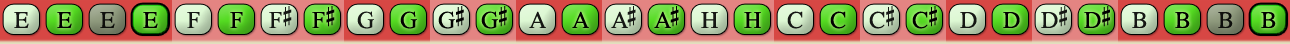
<style>
.page{position:relative;width:1290px;height:44px}
.page>*{position:absolute;margin:0}
.t1{font:24px "OpusChords";color:#000000}
.t2{font:24px "OpusChords";letter-spacing:-0.025em;color:#000000}
.t3{font:24px "OpusChords";letter-spacing:-0.1em;color:#000000}
</style>
<div class="page">
<p class="t1" style="left:269px;top:6px;width:23px;height:22px;opacity:0.9">F#</p>
<p class="t1" style="left:312px;top:6px;width:23px;height:22px">F#</p>
<p class="t2" style="left:438px;top:6px;width:26px;height:23px">G#</p>
<p class="t2" style="left:481px;top:6px;width:26px;height:23px">G#</p>
<p class="t3" style="left:611px;top:6px;width:25px;height:22px;opacity:0.9">A#</p>
<p class="t3" style="left:654px;top:6px;width:25px;height:22px">A#</p>
<p class="t1" style="left:869px;top:6px;width:25px;height:23px;opacity:0.9">C#</p>
<p class="t1" style="left:912px;top:6px;width:25px;height:23px">C#</p>
<p class="t2" style="left:1041px;top:6px;width:26px;height:22px;opacity:0.9">D#</p>
<p class="t2" style="left:1084px;top:6px;width:26px;height:22px">D#</p>
<p class="t1" style="left:14px;top:12px;width:15px;height:16px;opacity:0.9">E</p>
<p class="t1" style="left:57px;top:12px;width:15px;height:16px">E</p>
<p class="t1" style="left:100px;top:12px;width:15px;height:16px;opacity:0.9">E</p>
<p class="t1" style="left:143px;top:12px;width:15px;height:16px">E</p>
<p class="t1" style="left:187px;top:12px;width:13px;height:16px;opacity:0.9">F</p>
<p class="t1" style="left:230px;top:12px;width:13px;height:16px">F</p>
<p class="t1" style="left:357px;top:11px;width:17px;height:18px;opacity:0.9">G</p>
<p class="t1" style="left:400px;top:11px;width:17px;height:18px">G</p>
<p class="t1" style="left:529px;top:11px;width:17px;height:17px;opacity:0.9">A</p>
<p class="t1" style="left:572px;top:11px;width:17px;height:17px">A</p>
<p class="t1" style="left:701px;top:12px;width:17px;height:16px;opacity:0.9">H</p>
<p class="t1" style="left:744px;top:12px;width:17px;height:16px">H</p>
<p class="t1" style="left:787px;top:11px;width:16px;height:18px;opacity:0.9">C</p>
<p class="t1" style="left:830px;top:11px;width:16px;height:18px">C</p>
<p class="t1" style="left:960px;top:12px;width:17px;height:16px;opacity:0.9">D</p>
<p class="t1" style="left:1003px;top:12px;width:17px;height:16px">D</p>
<p class="t1" style="left:1132px;top:12px;width:15px;height:16px;opacity:0.9">B</p>
<p class="t1" style="left:1175px;top:12px;width:15px;height:16px">B</p>
<p class="t1" style="left:1218px;top:12px;width:15px;height:16px;opacity:0.9">B</p>
<p class="t1" style="left:1261px;top:12px;width:15px;height:16px">B</p>
</div>
